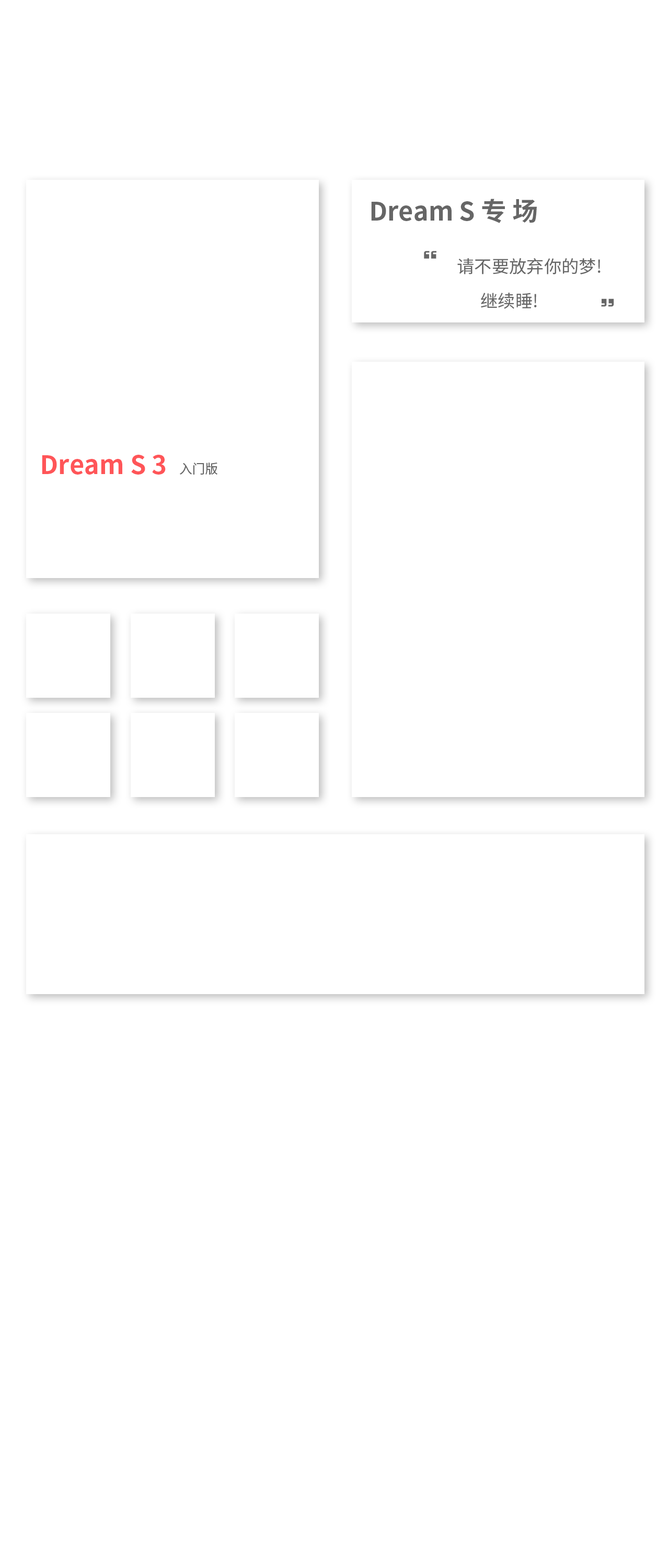
<style>
.page{position:relative;width:669px;height:1568px;background:#ffffff}
.page>*{position:absolute;margin:0}
.t1{font:25.7px "SourceHanSansSC-Bold";color:#666666}
.t2{font:32.7px "DFZongYi-Bd-80-Win-GB";color:#666666}
.t3{font:17.4px "SourceHanSansSC-Regular";color:#666666}
.t4{font:25.7px "SourceHanSansSC-Bold";color:#ff5558}
.t5{font:13.1px "SourceHanSansSC-Regular";color:#666666}
</style>
<div class="page">
<p class="t1" style="left:371px;top:199px;width:166px;height:24px">Dream S 专 场</p>
<p class="t2" style="left:424px;top:251px;width:12px;height:8px">“</p>
<p class="t3" style="left:457px;top:258px;width:144px;height:16px">请不要放弃你的梦!</p>
<p class="t3" style="left:481px;top:292px;width:56px;height:17px">继续睡!</p>
<p class="t2" style="left:601px;top:298px;width:13px;height:9px">”</p>
<p class="t4" style="left:42px;top:455px;width:124px;height:20px">Dream S 3</p>
<p class="t5" style="left:180px;top:463px;width:37px;height:12px">入门版</p>
</div>
